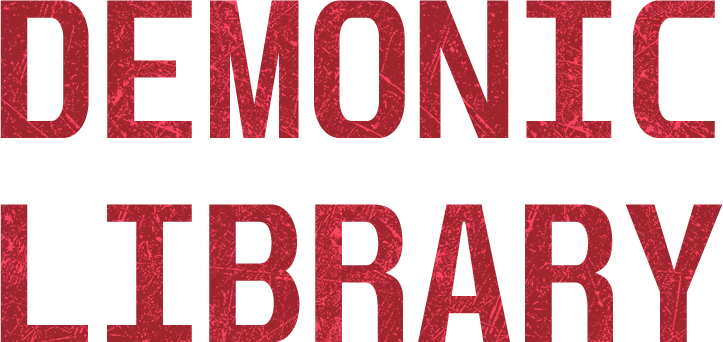
<style>
.page{position:relative;width:723px;height:342px;background:#ffffff}
.page>*{position:absolute;margin:0}
.t1{font:170px "Unispace-Bold";letter-spacing:0.006em;color:#a22630}
</style>
<div class="page">
<p class="t1" style="left:0px;top:0px;width:723px;height:342px;text-align:center">DEMONIC <br>LIBRARY</p>
</div>
